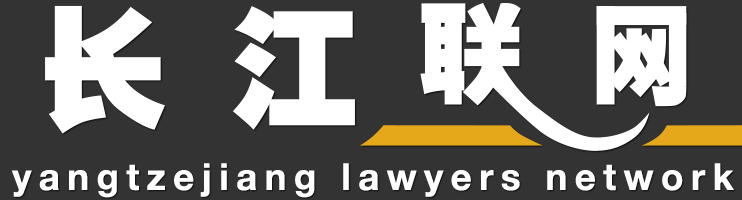
<style>
.page{position:relative;width:742px;height:200px;background:#333333}
.page>*{position:absolute;margin:0}
.t1{font:37.2px "HelveticaNeueLTPro-Bd";letter-spacing:0.2em;color:#ffffff}
</style>
<div class="page">
<p class="t1" style="left:11px;top:163px;width:723px;height:35px">yangtzejiang lawyers network</p>
</div>
